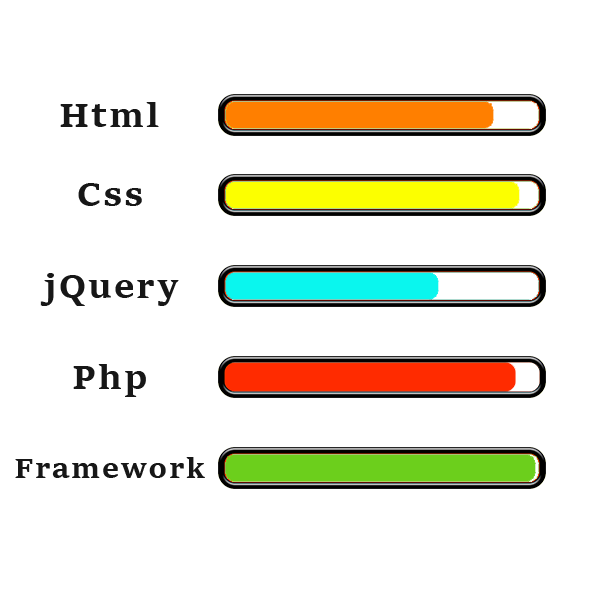
<style>
.page{position:relative;width:600px;height:600px;background:#ffffff}
.page>*{position:absolute;margin:0}
.t1{font:35px "SitkaSmall-Bold";letter-spacing:0.06em;color:#171717}
.t2{font:29px "SitkaSmall-Bold";letter-spacing:0.06em;color:#171717}
</style>
<div class="page">
<p class="t1" style="left:60px;top:102px;width:99px;height:25px">Html</p>
<p class="t1" style="left:78px;top:183px;width:64px;height:23px">Css</p>
<p class="t1" style="left:40px;top:273px;width:139px;height:33px">jQuery</p>
<p class="t1" style="left:73px;top:364px;width:73px;height:33px">Php</p>
<p class="t2" style="left:15px;top:457px;width:190px;height:21px">Framework</p>
</div>
